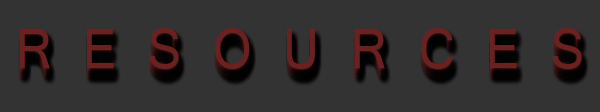
<style>
.page{position:relative;width:600px;height:112px;background:#333333}
.page>*{position:absolute;margin:0}
.t1{font:60px "Latha";color:#6c2121;scale:0.92 1}
.t2{font:60px "Latha";scale:0.92 1}
</style>
<div class="page">
<p class="t1" style="left:19px;top:30px;width:563px;height:41px">R E S O U R C E S</p>
<p class="t1" style="left:19px;top:29px;width:563px;height:41px">R E S O U R C E S</p>
<p class="t1" style="left:19px;top:28px;width:563px;height:41px">R E S O U R C E S</p>
<p class="t2" style="left:19px;top:38px;width:563px;height:41px">R E S O U R C E S</p>
<p class="t2" style="left:19px;top:37px;width:563px;height:41px">R E S O U R C E S</p>
<p class="t2" style="left:19px;top:36px;width:563px;height:41px">R E S O U R C E S</p>
<p class="t2" style="left:19px;top:35px;width:563px;height:41px">R E S O U R C E S</p>
<p class="t2" style="left:19px;top:34px;width:563px;height:41px">R E S O U R C E S</p>
<p class="t2" style="left:19px;top:33px;width:563px;height:41px">R E S O U R C E S</p>
<p class="t2" style="left:19px;top:31px;width:563px;height:41px">R E S O U R C E S</p>
</div>
